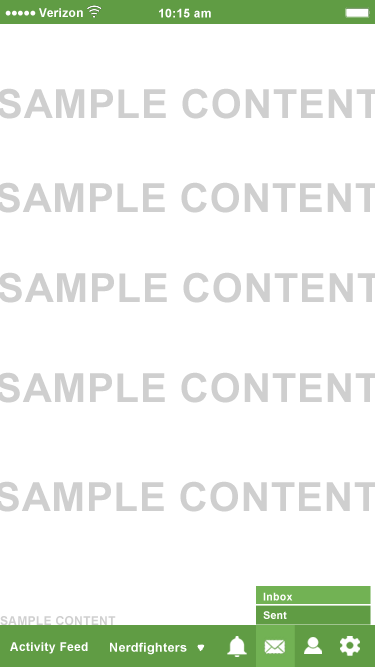
<style>
.page{position:relative;width:375px;height:667px;background:#ffffff}
.page>*{position:absolute;margin:0}
.t1{font:12px "Arial-BoldMT";letter-spacing:0.025em;color:#ffffff}
.t2{font:10.7px "Arial-BoldMT";letter-spacing:0.025em;color:#ffffff}
.t3{font:12.5px "Arial-BoldMT";letter-spacing:0.025em;color:#ffffff}
</style>
<div class="page">
<p class="t1" style="left:39px;top:8px;width:44px;height:9px">Verizon</p>
<p class="t1" style="left:159px;top:8px;width:52px;height:10px">10:15 am</p>
<p class="t2" style="left:263px;top:592px;width:30px;height:9px">Inbox</p>
<p class="t2" style="left:263px;top:611px;width:24px;height:8px">Sent</p>
<p class="t1" style="left:10px;top:642px;width:78px;height:12px">Activity Feed</p>
<p class="t3" style="left:110px;top:642px;width:77px;height:13px">Nerdfighters</p>
</div>
